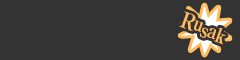
<style>
.page{position:relative;width:240px;height:60px;background:#333333}
.page>*{position:absolute;margin:0}
.t1{font:19.8px "RyuminPro-ExBold";letter-spacing:-0.08em;color:#ffbc5d;scale:0.9 1}
.t2{font:22px "RyuminPro-ExBold";letter-spacing:-0.08em;color:#ffbc5d;scale:0.9 1}
</style>
<div class="page">
<p class="t1" style="left:179px;top:11px;width:47px;height:34px;rotate:20deg"><span class="t2">R</span>usak</p>
</div>
